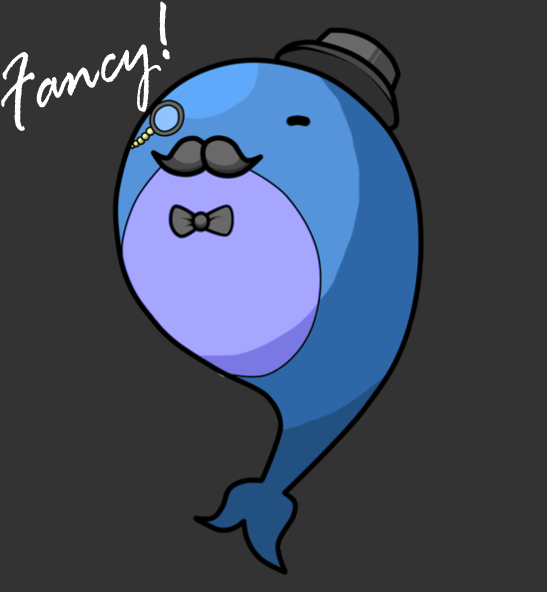
<style>
.page{position:relative;width:547px;height:592px;background:#333333}
.page>*{position:absolute;margin:0}
.t1{font:91.7px "RageItalic";color:#ffffff;scale:0.79 1}
</style>
<div class="page">
<p class="t1" style="left:1px;top:1px;width:169px;height:130px;rotate:-20deg">Fancy!</p>
</div>
